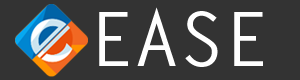
<style>
.page{position:relative;width:300px;height:80px;background:#333333}
.page>*{position:absolute;margin:0}
.t1{font:75px "LetterGothicStd-Bold";color:#ffffff}
</style>
<div class="page">
<p class="t1" style="left:99px;top:7px;width:164px;height:60px">EASE</p>
</div>
